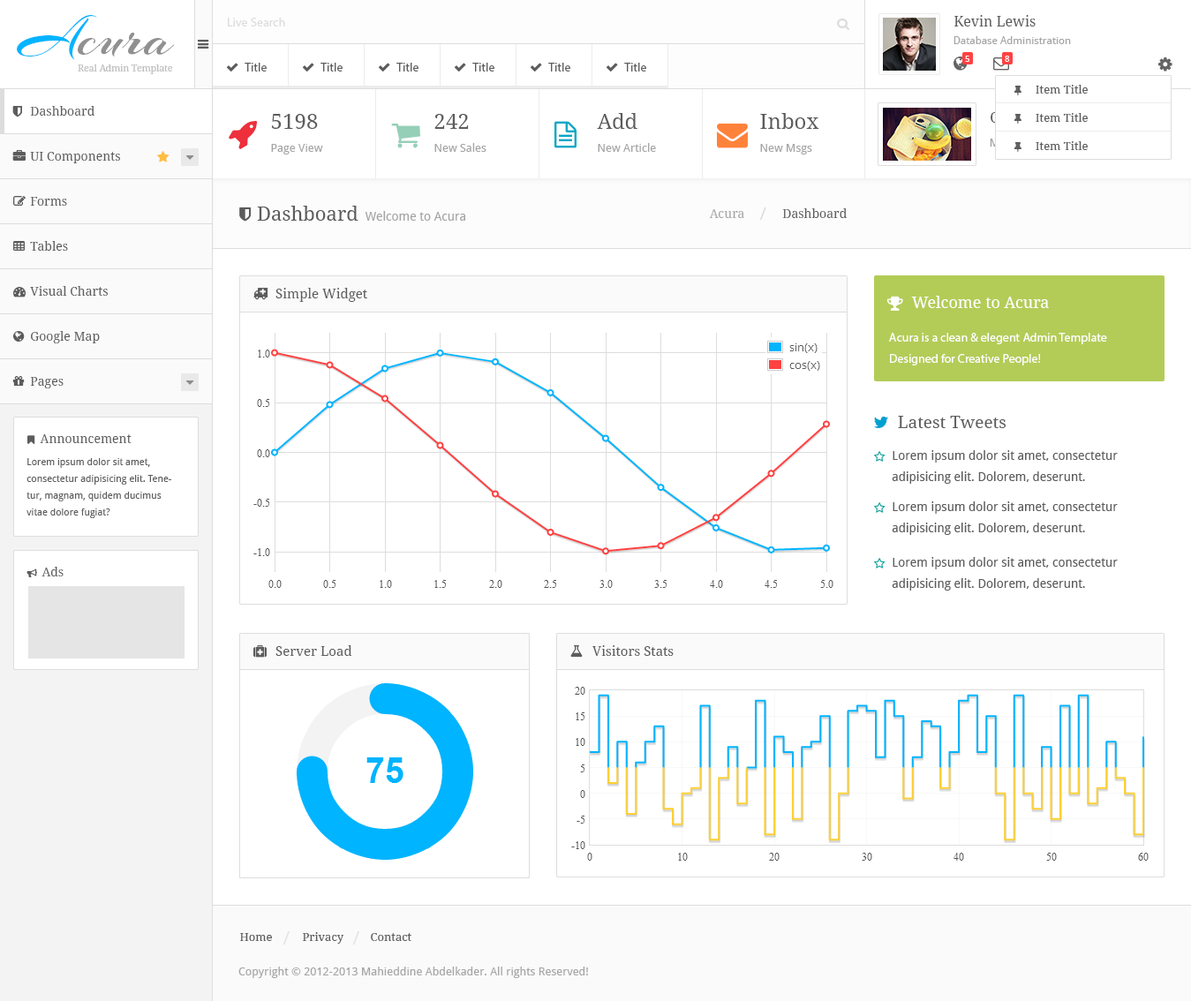
<style>
.page{position:relative;width:1191px;height:1001px;background:#ffffff}
.page>*{position:absolute;margin:0}
.t1{font:57.4px "Arizonia-Regular";color:#909090}
.t2{font:57.4px "Arizonia-Regular";color:#00b4ff}
.t3{font:12.4px "MyriadPro-Regular";color:#dddddd}
.t4{font:14.1px "DroidSerif";color:#5c5c5c}
.t5{font:10.6px "DroidSans";color:#a5a5a5}
.t6{font:9.3px "DroidSerif";color:#bdbdbd}
.t7{font:12.4px "MyriadPro-Regular";color:#5c5c5c}
.t8{font:8.8px "DroidSans";color:#ffffff}
.t9{font:11.5px "DroidSerif";color:#5c5c5c}
.t10{font:12.4px "DroidSerif";color:#5c5c5c}
.t11{font:21.2px "DroidSerif";color:#5c5c5c}
.t12{font:11.5px "DroidSans";color:#a5a5a5}
.t13{font:19.4px "DroidSerif";color:#5c5c5c}
.t14{font:12.4px "DroidSerif";color:#a5a5a5}
.t15{font:17.7px "DroidSans";color:#dbdbdb}
.t16{font:12.4px "DroidSans";color:#a5a5a5}
.t17{font:13.2px "DroidSerif";color:#5c5c5c}
.t18{font:15.9px "DroidSerif";color:#ffffff}
.t19{font:12.4px/21.2px "MyriadPro-Regular";color:#ffffff}
.t20{font:16.8px "DroidSerif";color:#5c5c5c}
.t21{font:9.7px/16.8px "DroidSans";color:#5c5c5c}
.t22{font:12.4px/21.2px "DroidSans";color:#5c5c5c}
.t23{font:18.5px "DroidSans";color:#e4e4e4}
</style>
<div class="page">
<p class="t1" style="left:17px;top:15px;width:158px;height:45px"><span class="t2">A</span>cura</p>
<p class="t3" style="left:228px;top:18px;width:57px;height:8px">Live Search</p>
<p class="t4" style="left:954px;top:15px;width:82px;height:11px">Kevin Lewis</p>
<p class="t5" style="left:954px;top:36px;width:117px;height:8px">Database Administration</p>
<p class="t6" style="left:78px;top:64px;width:95px;height:10px">Real Admin Template</p>
<p class="t7" style="left:245px;top:63px;width:22px;height:9px">Title</p>
<p class="t7" style="left:320px;top:63px;width:23px;height:9px">Title</p>
<p class="t7" style="left:396px;top:63px;width:22px;height:9px">Title</p>
<p class="t7" style="left:472px;top:63px;width:22px;height:9px">Title</p>
<p class="t7" style="left:548px;top:63px;width:22px;height:9px">Title</p>
<p class="t7" style="left:624px;top:63px;width:22px;height:9px">Title</p>
<p class="t8" style="left:965px;top:56px;width:4px;height:6px">5</p>
<p class="t8" style="left:1005px;top:56px;width:5px;height:6px">8</p>
<p class="t9" style="left:1036px;top:85px;width:52px;height:9px">Item Title</p>
<p class="t10" style="left:30px;top:106px;width:65px;height:10px">Dashboard</p>
<p class="t11" style="left:271px;top:114px;width:47px;height:15px">5198</p>
<p class="t11" style="left:434px;top:114px;width:35px;height:15px">242</p>
<p class="t11" style="left:597px;top:113px;width:40px;height:16px">Add</p>
<p class="t11" style="left:760px;top:113px;width:59px;height:16px">Inbox</p>
<p class="t9" style="left:1036px;top:113px;width:52px;height:9px">Item Title</p>
<p class="t12" style="left:271px;top:144px;width:52px;height:11px">Page View</p>
<p class="t12" style="left:434px;top:143px;width:52px;height:9px">New Sales</p>
<p class="t12" style="left:598px;top:143px;width:58px;height:9px">New Article</p>
<p class="t12" style="left:760px;top:144px;width:52px;height:11px">New Msgs</p>
<p class="t9" style="left:1036px;top:141px;width:52px;height:9px">Item Title</p>
<p class="t10" style="left:30px;top:152px;width:90px;height:11px">UI Components</p>
<p class="t10" style="left:30px;top:197px;width:37px;height:9px">Forms</p>
<p class="t13" style="left:257px;top:206px;width:101px;height:15px">Dashboard</p>
<p class="t14" style="left:709px;top:209px;width:35px;height:9px">Acura</p>
<p class="t15" style="left:759px;top:207px;width:7px;height:13px">/</p>
<p class="t10" style="left:782px;top:208px;width:66px;height:10px">Dashboard</p>
<p class="t16" style="left:365px;top:211px;width:100px;height:10px">Welcome to Acura</p>
<p class="t10" style="left:30px;top:241px;width:38px;height:10px">Tables</p>
<p class="t10" style="left:30px;top:286px;width:78px;height:10px">Visual Charts</p>
<p class="t17" style="left:275px;top:288px;width:92px;height:14px">Simple Widget</p>
<p class="t18" style="left:911px;top:296px;width:138px;height:12px">Welcome to Acura</p>
<p class="t10" style="left:31px;top:331px;width:69px;height:12px">Google Map</p>
<p class="t19" style="left:889px;top:333px;width:218px;height:33px">Acura is a clean &amp; elegent Admin Template Designed for Creative People!</p>
<p class="t10" style="left:30px;top:377px;width:34px;height:11px">Pages</p>
<p class="t20" style="left:898px;top:416px;width:108px;height:12px">Latest Tweets</p>
<p class="t10" style="left:40px;top:434px;width:92px;height:9px">Announcement</p>
<p class="t21" style="left:26px;top:458px;width:145px;height:60px">Lorem ipsum dolor sit amet, consectetur adipisicing elit. Tenetur, magnam, quidem ducimus vitae dolore fugiat?</p>
<p class="t22" style="left:892px;top:450px;width:226px;height:34px">Lorem ipsum dolor sit amet, consectetur adipisicing elit. Dolorem, deserunt.</p>
<p class="t22" style="left:892px;top:501px;width:226px;height:34px">Lorem ipsum dolor sit amet, consectetur adipisicing elit. Dolorem, deserunt.</p>
<p class="t22" style="left:892px;top:557px;width:226px;height:34px">Lorem ipsum dolor sit amet, consectetur adipisicing elit. Dolorem, deserunt.</p>
<p class="t10" style="left:41px;top:567px;width:23px;height:10px">Ads</p>
<p class="t17" style="left:275px;top:645px;width:77px;height:11px">Server Load</p>
<p class="t17" style="left:592px;top:645px;width:82px;height:11px">Visitors Stats</p>
<p class="t9" style="left:239px;top:933px;width:33px;height:8px">Home</p>
<p class="t23" style="left:283px;top:931px;width:7px;height:14px">/</p>
<p class="t9" style="left:302px;top:932px;width:42px;height:12px">Privacy</p>
<p class="t23" style="left:352px;top:931px;width:7px;height:14px">/</p>
<p class="t9" style="left:371px;top:933px;width:40px;height:8px">Contact</p>
<p class="t12" style="left:238px;top:967px;width:350px;height:11px">Copyright © 2012-2013 Mahieddine Abdelkader. All rights Reserved!</p>
</div>
